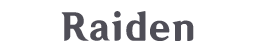
<style>
.page{position:relative;width:256px;height:56px;background:#ffffff}
.page>*{position:absolute;margin:0}
.t1{font:36px "HYWenHei-HEW";color:#4f4e57}
</style>
<div class="page">
<p class="t1" style="left:61px;top:11px;width:133px;height:30px">Raiden</p>
</div>
